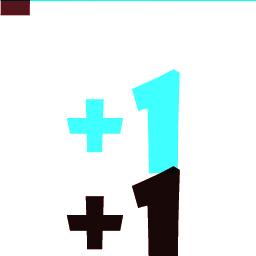
<style>
.page{position:relative;width:256px;height:256px;background:#ffffff}
.page>*{position:absolute;margin:0}
.t1{font:133px "ShowcardGothic-Reg";color:#40ffff}
</style>
<div class="page">
<p class="t1" style="left:66px;top:68px;width:114px;height:105px">+1</p>
</div>
